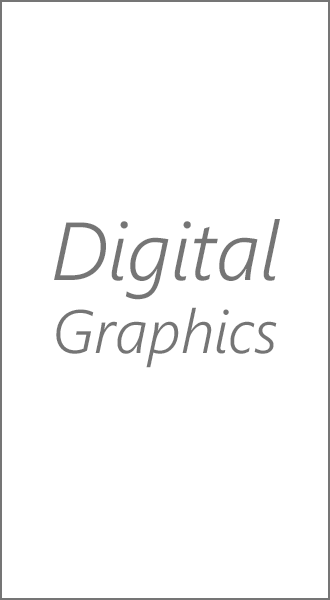
<style>
.page{position:relative;width:330px;height:600px;background:#ffffff}
.page>*{position:absolute;margin:0}
.t1{font:61px "SegoeUI-SemilightItalic";color:#757575}
.t2{font:82.1px "SegoeUI-SemilightItalic";color:#757575}
</style>
<div class="page">
<p class="t1" style="left:54px;top:219px;width:226px;height:149px;text-align:center"><span class="t2">Digital<br></span>Graphics</p>
</div>
